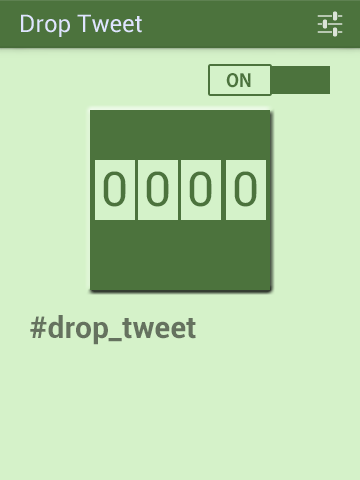
<style>
.page{position:relative;width:360px;height:480px;background:#d5f2c9}
.page>*{position:absolute;margin:0}
.t1{font:18px "KozGoPr6N-Bold";color:#4c733d}
.t2{font:48px "Roboto-Regular";color:#4c733d}
.t3{font:30px "Roboto-Bold";color:#65725f}
</style>
<div class="page">
<p class="t1" style="left:226px;top:73px;width:25px;height:15px">ON</p>
<p class="t2" style="left:103px;top:171px;width:23px;height:36px">0</p>
<p class="t2" style="left:146px;top:171px;width:23px;height:36px">0</p>
<p class="t2" style="left:189px;top:171px;width:23px;height:36px">0</p>
<p class="t2" style="left:234px;top:171px;width:23px;height:36px">0</p>
<p class="t3" style="left:30px;top:315px;width:166px;height:30px">#drop_tweet</p>
</div>
